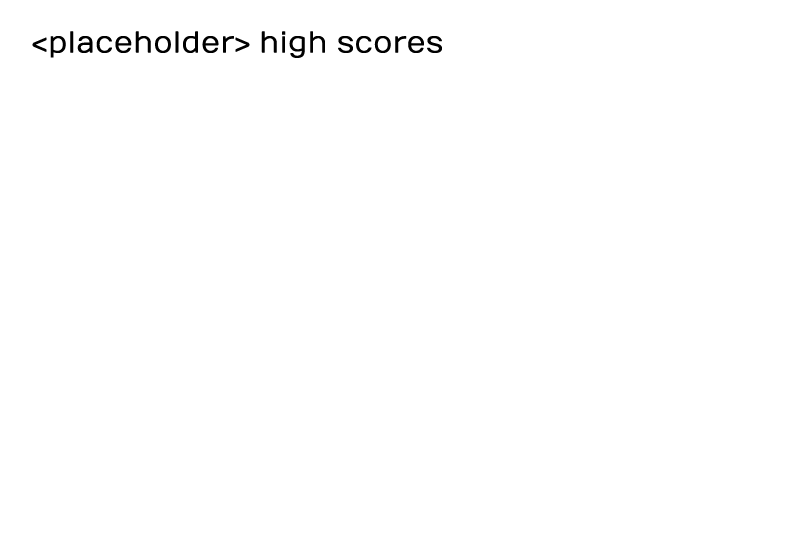
<style>
.page{position:relative;width:800px;height:540px;background:#ffffff}
.page>*{position:absolute;margin:0}
.t1{font:30px "Numans-Regular";color:#000000}
</style>
<div class="page">
<p class="t1" style="left:32px;top:31px;width:410px;height:27px">&lt;placeholder&gt; high scores</p>
</div>
